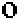
<style>
.page{position:relative;width:19px;height:21px;background:#ffffff}
.page>*{position:absolute;margin:0}
.t1{font:18px "Emulogic";letter-spacing:0.018em;color:#000000}
</style>
<div class="page">
<p class="t1" style="left:2px;top:2px;width:15px;height:16px">0</p>
</div>
